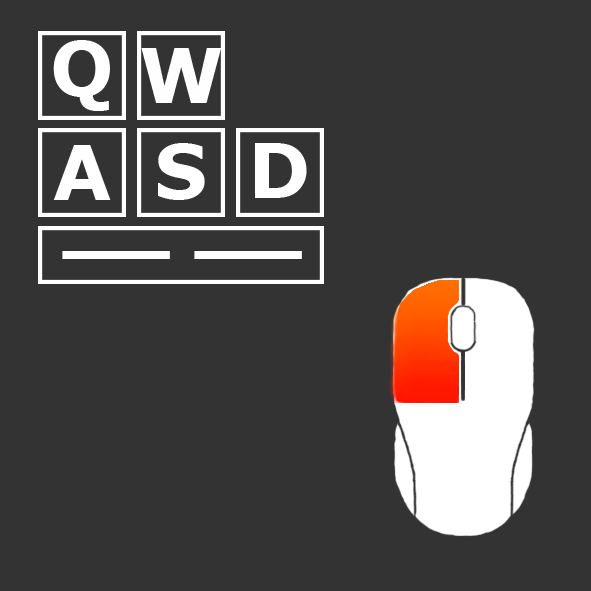
<style>
.page{position:relative;width:591px;height:591px;background:#333333}
.page>*{position:absolute;margin:0}
.t1{font:75px "Verdana-Bold";color:#ffffff}
.t2{font:75px "Verdana-Bold";color:#fefefe}
</style>
<div class="page">
<p class="t1" style="left:53px;top:40px;width:57px;height:71px">Q</p>
<p class="t2" style="left:141px;top:48px;width:81px;height:55px">W</p>
<p class="t1" style="left:53px;top:145px;width:58px;height:55px">A</p>
<p class="t1" style="left:158px;top:143px;width:47px;height:57px">S</p>
<p class="t1" style="left:255px;top:143px;width:52px;height:55px">D</p>
<p class="t1" style="left:62px;top:251px;width:240px;height:8px">__ __</p>
</div>
